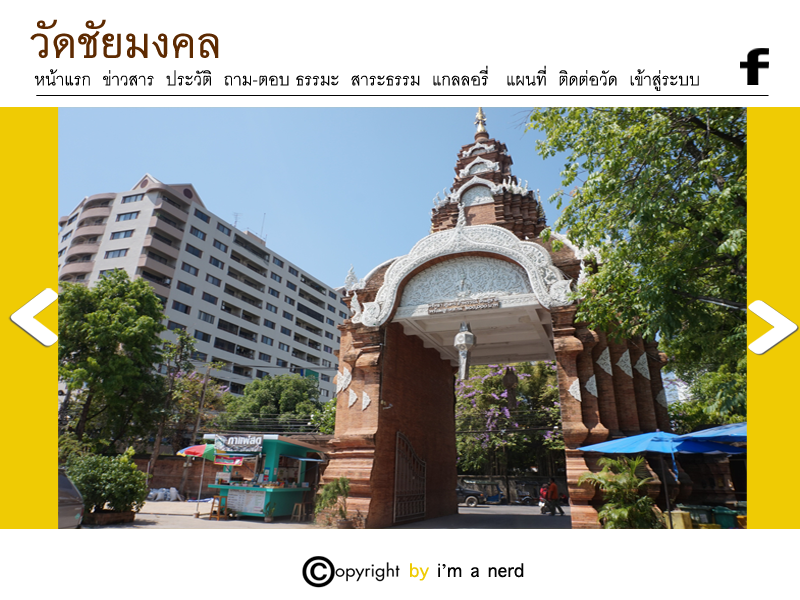
<style>
.page{position:relative;width:800px;height:600px;background:#ffffff}
.page>*{position:absolute;margin:0}
.t1{font:60px "TFChiangsaen-Bold";color:#5d2a01}
.t2{font:24px "TFSrivichai";color:#010101}
.t3{font:24px "AppleSymbols";color:#030303}
.t4{font:24px "AppleSymbols";color:#efcb04}
</style>
<div class="page">
<p class="t1" style="left:30px;top:19px;width:189px;height:39px">วัดชัยมงคล</p>
<p class="t2" style="left:34px;top:65px;width:665px;height:26px">หน้าแรก  ข่าวสาร  ประวัติ  ถาม-ตอบ ธรรมะ  สาระธรรม  แกลลอรี่   แผนที่  ติดต่อวัด  เข้าสู่ระบบ</p>
<p class="t3" style="left:410px;top:563px;width:114px;height:18px"><span class="t4">by </span>i’m a nerd</p>
</div>
